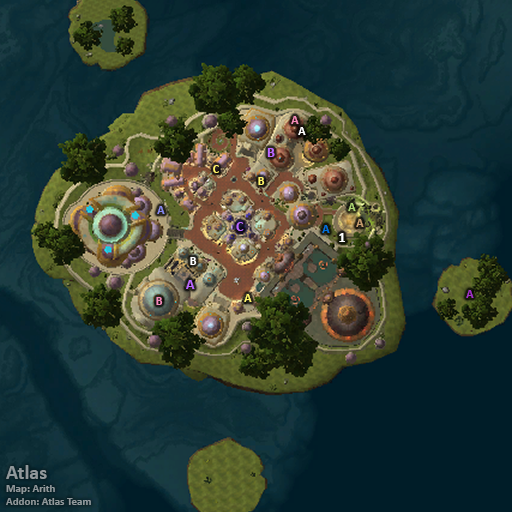
<style>
.page{position:relative;width:512px;height:512px}
.page>*{position:absolute;margin:0}
.t1{font:12px "Calibri-Bold";color:#f58cba}
.t2{font:12px "Calibri-Bold";color:#ffffff}
.t3{font:14px "Calibri-Bold";color:#bb66ff}
.t4{font:12px "Calibri-Bold";color:#fff569}
.t5{font:12px "Calibri-Bold";color:#8788ee}
.t6{font:12px "Calibri-Bold";color:#abd473}
.t7{font:12px "Calibri-Bold";color:#c79c6e}
.t8{font:12px "Calibri-Bold";color:#0070de}
.t9{font:14px "Calibri-Bold";color:#ffffff}
.t10{font:12px "Calibri-Bold";color:#a330c9}
.t11{font:11px "Calibri-Bold";color:#8f979a}
.t12{font:20px "Calibri-Bold";color:#8f979a}
</style>
<div class="page">
<p class="t1" style="left:291px;top:116px;width:8px;height:8px">A</p>
<p class="t2" style="left:298px;top:127px;width:8px;height:8px">A</p>
<p class="t3" style="left:267px;top:148px;width:8px;height:9px">B</p>
<p class="t4" style="left:213px;top:165px;width:6px;height:8px">C</p>
<p class="t4" style="left:258px;top:177px;width:7px;height:8px">B</p>
<p class="t5" style="left:157px;top:206px;width:8px;height:8px">A</p>
<p class="t6" style="left:348px;top:203px;width:8px;height:8px">A</p>
<p class="t3" style="left:236px;top:222px;width:8px;height:9px">C</p>
<p class="t7" style="left:356px;top:219px;width:8px;height:8px">A</p>
<p class="t8" style="left:322px;top:225px;width:8px;height:8px">A</p>
<p class="t9" style="left:339px;top:233px;width:6px;height:9px">1</p>
<p class="t2" style="left:190px;top:257px;width:7px;height:8px">B</p>
<p class="t3" style="left:186px;top:280px;width:9px;height:9px">A</p>
<p class="t4" style="left:244px;top:294px;width:8px;height:8px">A</p>
<p class="t10" style="left:466px;top:290px;width:8px;height:8px">A</p>
<p class="t1" style="left:156px;top:297px;width:7px;height:8px">B</p>
<p class="t11" style="left:6px;top:465px;width:85px;height:40px"><span class="t12">Atlas<br></span>Map: Arith<br>Addon: Atlas Team</p>
</div>
